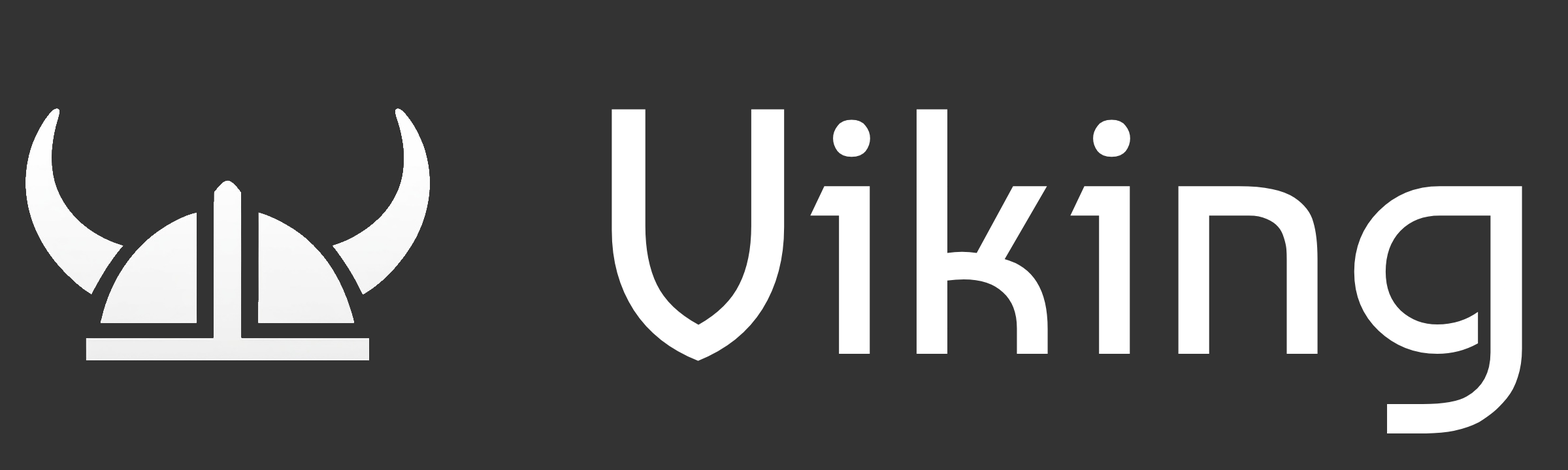
<style>
.page{position:relative;width:1568px;height:470px;background:#333333}
.page>*{position:absolute;margin:0}
.t1{font:349.5px "Baumans-Regular";color:#ffffff}
</style>
<div class="page">
<p class="t1" style="left:612px;top:109px;width:910px;height:325px">Viking</p>
</div>
